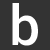
<style>
.page{position:relative;width:50px;height:50px;background:#333333}
.page>*{position:absolute;margin:0}
.t1{font:55px "Roboto-Medium";letter-spacing:0.05em;color:#ffffff}
</style>
<div class="page">
<p class="t1" style="left:12px;top:3px;width:26px;height:43px">b</p>
</div>
